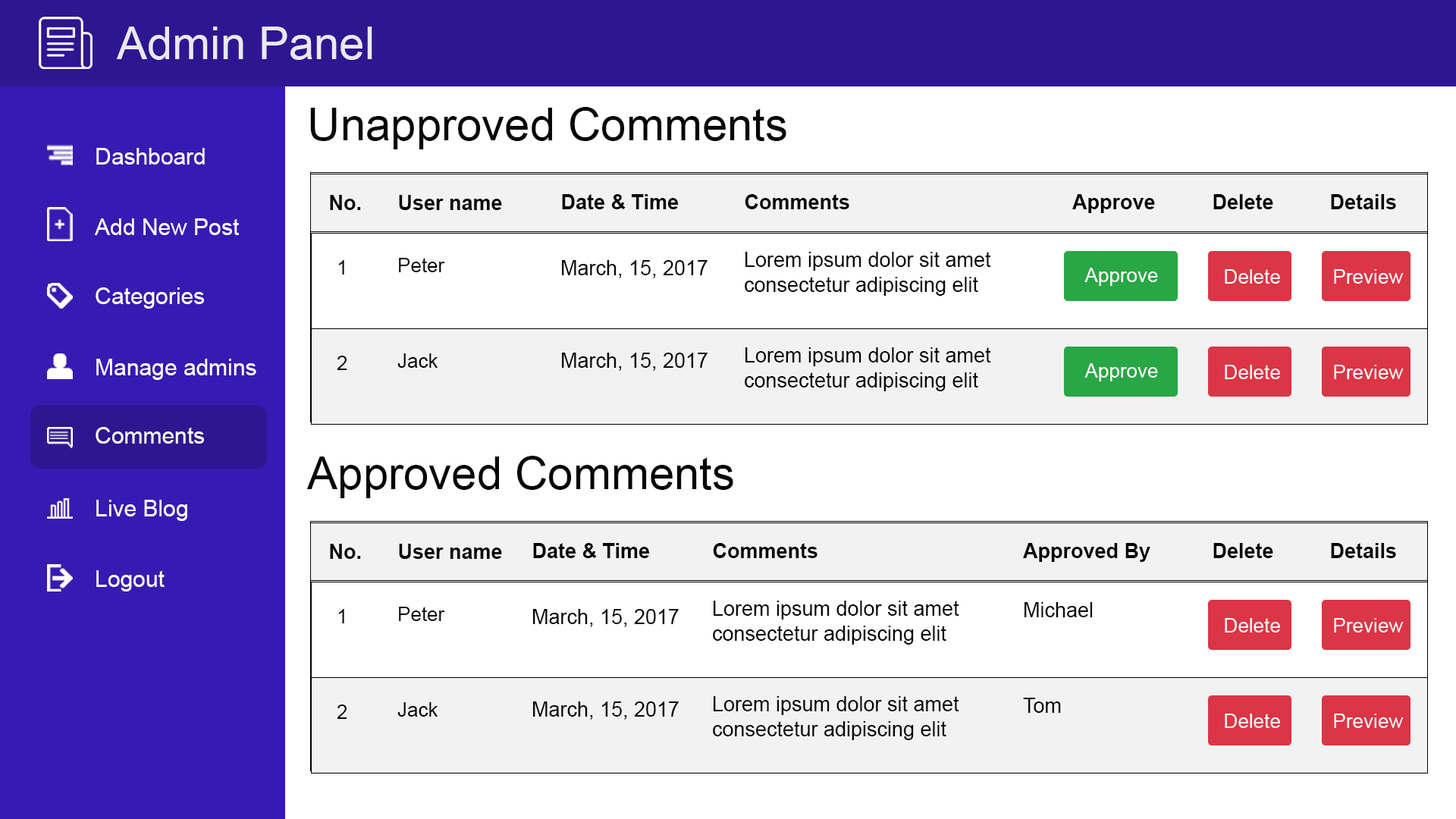
<style>
.page{position:relative;width:1456px;height:819px;background:#ffffff}
.page>*{position:absolute;margin:0}
.t1{font:45.5px "ArialMT";color:#eae8f4}
.t2{font:45.5px "ArialMT";color:#060606}
.t3{font:22.7px "ArialMT";color:#ffffff}
.t4{font:20.5px "Arial-BoldMT";color:#060606}
.t5{font:19.7px "ArialMT";color:#000000}
.t6{font:20.5px "ArialMT";color:#060606}
.t7{font:19.7px "ArialMT";color:#060606}
.t8{font:19.7px "ArialMT";color:#ffffff}
</style>
<div class="page">
<p class="t1" style="left:116px;top:27px;width:256px;height:33px">Admin Panel</p>
<p class="t2" style="left:310px;top:107px;width:476px;height:42px">Unapproved Comments</p>
<p class="t3" style="left:96px;top:148px;width:109px;height:17px">Dashboard</p>
<p class="t4" style="left:330px;top:195px;width:31px;height:15px">No.</p>
<p class="t4" style="left:399px;top:195px;width:103px;height:15px">User name</p>
<p class="t4" style="left:562px;top:194px;width:116px;height:15px">Date &amp; Time</p>
<p class="t4" style="left:745px;top:194px;width:104px;height:15px">Comments</p>
<p class="t4" style="left:1072px;top:194px;width:83px;height:19px">Approve</p>
<p class="t4" style="left:1213px;top:194px;width:60px;height:15px">Delete</p>
<p class="t4" style="left:1331px;top:194px;width:65px;height:15px">Details</p>
<p class="t3" style="left:94px;top:218px;width:145px;height:17px">Add New Post</p>
<p class="t5" style="left:399px;top:258px;width:46px;height:14px">Peter</p>
<p class="t6" style="left:745px;top:252px;width:246px;height:44px">Lorem ipsum dolor sit amet consectetur adipiscing elit</p>
<p class="t7" style="left:338px;top:260px;width:6px;height:15px">1</p>
<p class="t6" style="left:562px;top:260px;width:146px;height:18px">March, 15, 2017</p>
<p class="t8" style="left:1084px;top:268px;width:74px;height:18px">Approve</p>
<p class="t8" style="left:1225px;top:269px;width:55px;height:15px">Delete</p>
<p class="t8" style="left:1334px;top:269px;width:70px;height:15px">Preview</p>
<p class="t3" style="left:96px;top:287px;width:108px;height:22px">Categories</p>
<p class="t5" style="left:397px;top:353px;width:41px;height:15px">Jack</p>
<p class="t6" style="left:562px;top:353px;width:146px;height:18px">March, 15, 2017</p>
<p class="t6" style="left:745px;top:347px;width:246px;height:44px">Lorem ipsum dolor sit amet consectetur adipiscing elit</p>
<p class="t3" style="left:96px;top:359px;width:160px;height:21px">Manage admins</p>
<p class="t7" style="left:337px;top:356px;width:10px;height:14px">2</p>
<p class="t8" style="left:1084px;top:363px;width:74px;height:18px">Approve</p>
<p class="t8" style="left:1225px;top:365px;width:55px;height:14px">Delete</p>
<p class="t8" style="left:1334px;top:365px;width:70px;height:14px">Preview</p>
<p class="t3" style="left:96px;top:427px;width:108px;height:17px">Comments</p>
<p class="t2" style="left:306px;top:456px;width:427px;height:42px">Approved Comments</p>
<p class="t3" style="left:96px;top:500px;width:91px;height:21px">Live Blog</p>
<p class="t4" style="left:330px;top:544px;width:31px;height:15px">No.</p>
<p class="t4" style="left:399px;top:544px;width:103px;height:15px">User name</p>
<p class="t4" style="left:533px;top:543px;width:116px;height:15px">Date &amp; Time</p>
<p class="t4" style="left:713px;top:543px;width:104px;height:15px">Comments</p>
<p class="t4" style="left:1023px;top:543px;width:127px;height:19px">Approved By</p>
<p class="t4" style="left:1213px;top:543px;width:60px;height:15px">Delete</p>
<p class="t4" style="left:1331px;top:543px;width:65px;height:15px">Details</p>
<p class="t3" style="left:96px;top:570px;width:69px;height:21px">Logout</p>
<p class="t6" style="left:713px;top:601px;width:246px;height:44px">Lorem ipsum dolor sit amet consectetur adipiscing elit</p>
<p class="t6" style="left:1024px;top:602px;width:69px;height:15px">Michael</p>
<p class="t7" style="left:338px;top:609px;width:6px;height:14px">1</p>
<p class="t5" style="left:399px;top:607px;width:46px;height:14px">Peter</p>
<p class="t6" style="left:533px;top:609px;width:146px;height:18px">March, 15, 2017</p>
<p class="t8" style="left:1225px;top:618px;width:55px;height:14px">Delete</p>
<p class="t8" style="left:1334px;top:618px;width:70px;height:14px">Preview</p>
<p class="t6" style="left:533px;top:701px;width:146px;height:19px">March, 15, 2017</p>
<p class="t6" style="left:713px;top:696px;width:246px;height:44px">Lorem ipsum dolor sit amet consectetur adipiscing elit</p>
<p class="t6" style="left:1023px;top:698px;width:38px;height:15px">Tom</p>
<p class="t7" style="left:337px;top:704px;width:10px;height:15px">2</p>
<p class="t5" style="left:397px;top:702px;width:41px;height:15px">Jack</p>
<p class="t8" style="left:1225px;top:714px;width:55px;height:14px">Delete</p>
<p class="t8" style="left:1334px;top:714px;width:70px;height:14px">Preview</p>
</div>
